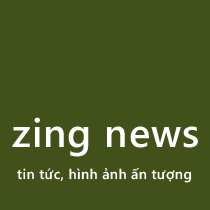
<style>
.page{position:relative;width:210px;height:210px;background:#42501a}
.page>*{position:absolute;margin:0}
.t1{font:40px "SegoeWP-Semibold";letter-spacing:0.025em;color:#ffffff}
.t2{font:14px "SegoeWP-Semibold";letter-spacing:0.025em;color:#fefefe}
</style>
<div class="page">
<p class="t1" style="left:12px;top:117px;width:186px;height:40px">zing news</p>
<p class="t2" style="left:17px;top:168px;width:175px;height:15px">tin tức, hình ảnh ấn tượng</p>
</div>
